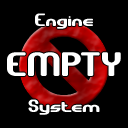
<style>
.page{position:relative;width:128px;height:128px;background:#000000}
.page>*{position:absolute;margin:0}
.t1{font:18px "GravitateBRK";color:#ffffff}
.t2{font:34px "GravitateBRK";color:#ffffff}
</style>
<div class="page">
<p class="t1" style="left:35px;top:13px;width:58px;height:16px">Engine</p>
<p class="t2" style="left:7px;top:52px;width:114px;height:24px">EMPTY</p>
<p class="t1" style="left:28px;top:99px;width:72px;height:16px">System</p>
</div>
